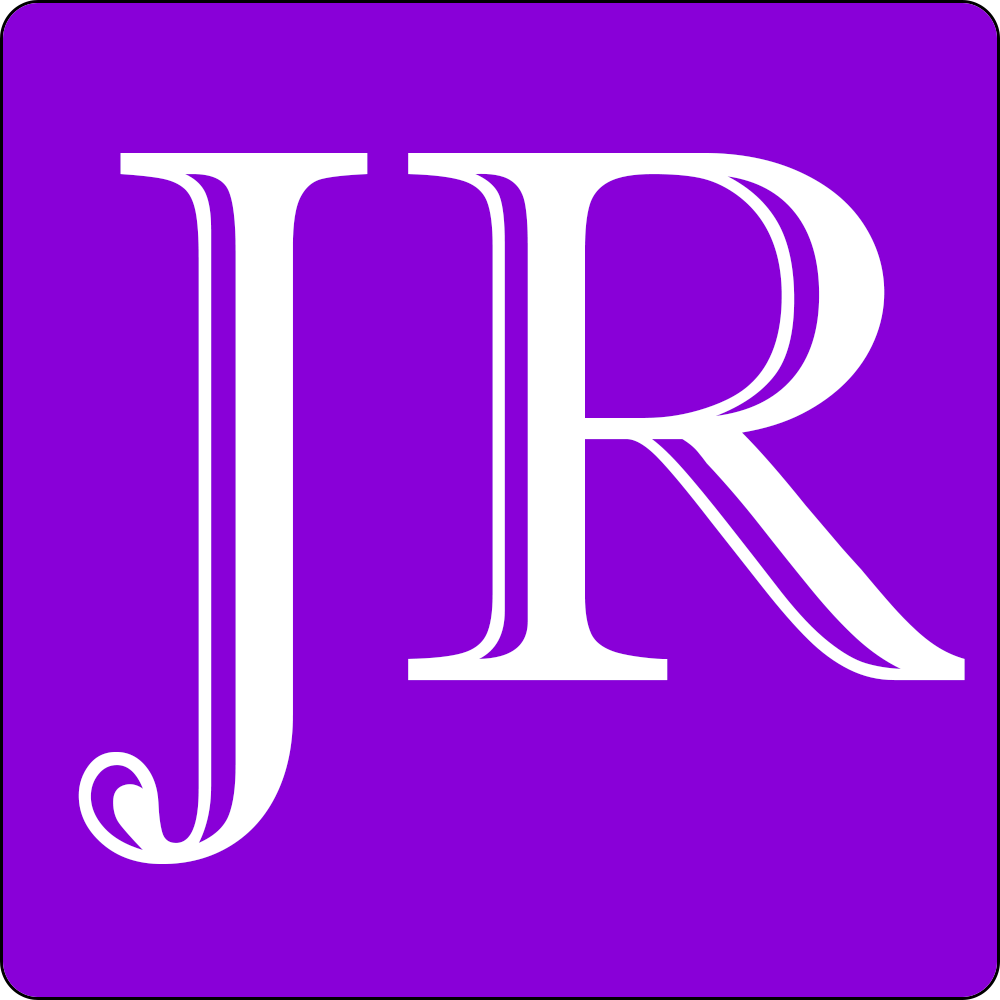
<style>
.page{position:relative;width:1000px;height:1000px;background:#8900d8}
.page>*{position:absolute;margin:0}
.t1{font:765px "ImprintMT-Shadow";color:#ffffff}
</style>
<div class="page">
<p class="t1" style="left:78px;top:153px;width:887px;height:711px">JR</p>
</div>
